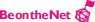
<style>
.page{position:relative;width:95px;height:22px;background:#ffffff}
.page>*{position:absolute;margin:0}
.t1{font:13px "GillSansMT-Bold";letter-spacing:-0.06em;color:#dd137b}
</style>
<div class="page">
<p class="t1" style="left:0px;top:10px;width:71px;height:10px">Be on the Net</p>
</div>
